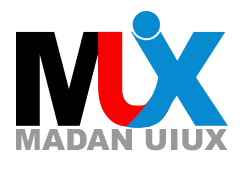
<style>
.page{position:relative;width:244px;height:170px;background:#ffffff}
.page>*{position:absolute;margin:0}
.t1{font:29.4px "Arial-Black";color:#999999}
</style>
<div class="page">
<p class="t1" style="left:16px;top:129px;width:212px;height:22px">MADAN UIUX</p>
</div>
